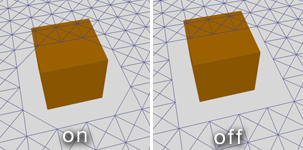
<style>
.page{position:relative;width:303px;height:150px;background:#d7d7d7}
.page>*{position:absolute;margin:0}
.t1{font:20.8px "HelveticaNeue";letter-spacing:0.1em;color:#ffffff}
</style>
<div class="page">
<p class="t1" style="left:63px;top:131px;width:24px;height:12px">on</p>
<p class="t1" style="left:214px;top:129px;width:29px;height:16px">off</p>
</div>
